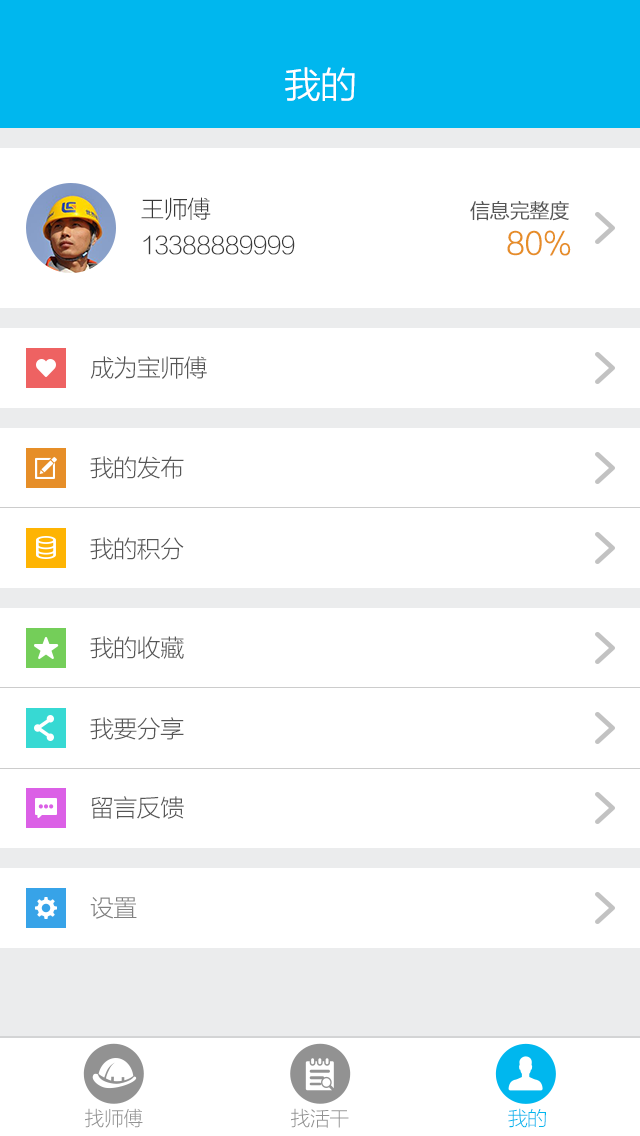
<style>
.page{position:relative;width:640px;height:1136px;background:#ffffff}
.page>*{position:absolute;margin:0}
.t1{font:36px "FZLTXHK--GBK1-0";letter-spacing:-0.025em;color:#ffffff;font-weight:bold}
.t2{font:24px/31.6px "FZLTXHK--GBK1-0";letter-spacing:-0.025em;color:#393939}
.t3{font:20px/31.6px "FZLTXHK--GBK1-0";letter-spacing:-0.025em;color:#565656;font-weight:bold}
.t4{font:30px/31.6px "FZLTXHK--GBK1-0";letter-spacing:-0.025em;color:#e68e28;font-weight:bold}
.t5{font:24px "FZLTXHK--GBK1-0";letter-spacing:-0.025em;color:#565656}
.t6{font:24px "FZLTXHK--GBK1-0";letter-spacing:-0.025em;color:#808080}
.t7{font:20px "FZLTXHK--GBK1-0";letter-spacing:-0.025em;color:#929292}
.t8{font:20px "FZLTXHK--GBK1-0";letter-spacing:-0.025em;color:#00b7ee}
</style>
<div class="page">
<p class="t1" style="left:285px;top:67px;width:70px;height:34px">我的</p>
<p class="t2" style="left:141px;top:197px;width:154px;height:58px">王师傅<br>13388889999</p>
<p class="t3" style="left:470px;top:201px;width:101px;height:55px">信息完整度    <br>          <span class="t4">80%</span></p>
<p class="t5" style="left:90px;top:356px;width:117px;height:23px">成为宝师傅</p>
<p class="t5" style="left:90px;top:456px;width:94px;height:23px">我的发布</p>
<p class="t5" style="left:90px;top:537px;width:94px;height:23px">我的积分</p>
<p class="t5" style="left:90px;top:636px;width:94px;height:23px">我的收藏</p>
<p class="t5" style="left:90px;top:717px;width:94px;height:23px">我要分享</p>
<p class="t5" style="left:91px;top:796px;width:93px;height:23px">留言反馈</p>
<p class="t6" style="left:90px;top:897px;width:47px;height:22px">设置</p>
<p class="t7" style="left:85px;top:1108px;width:58px;height:20px">找师傅</p>
<p class="t7" style="left:291px;top:1108px;width:58px;height:20px">找活干</p>
<p class="t8" style="left:508px;top:1108px;width:38px;height:20px">我的</p>
</div>
